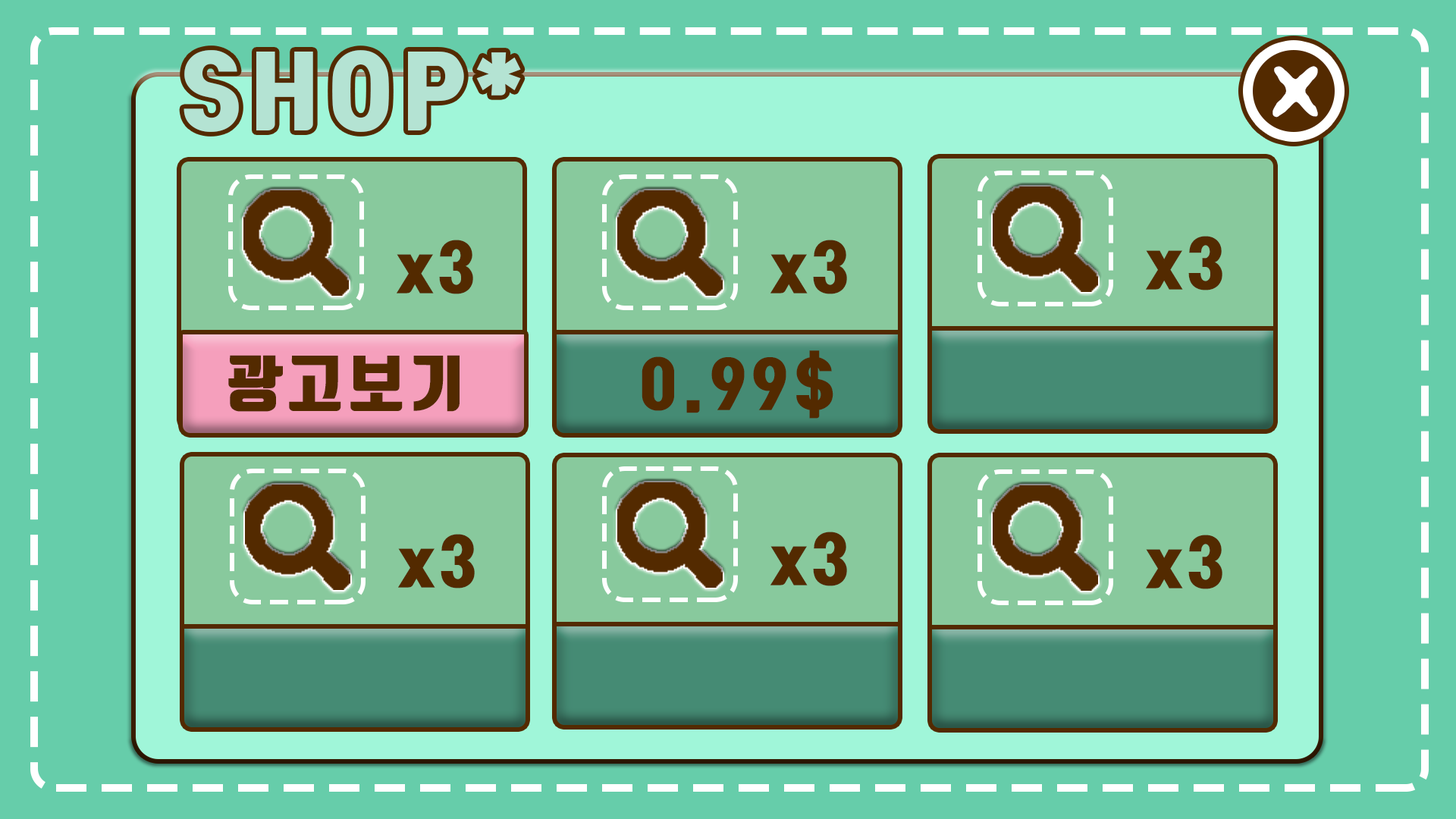
<style>
.page{position:relative;width:1456px;height:819px;background:#66cdaa}
.page>*{position:absolute;margin:0}
.t1{font:91px "TmonMonsoriBlack";letter-spacing:0.1em;color:#b4e3d3}
.t2{font:60.7px "TmonMonsoriBlack";letter-spacing:0.1em;color:#532a00}
</style>
<div class="page">
<p class="t1" style="left:184px;top:50px;width:337px;height:82px">SHOP*</p>
<p class="t2" style="left:397px;top:240px;width:76px;height:54px">x3</p>
<p class="t2" style="left:770px;top:240px;width:77px;height:54px">x3</p>
<p class="t2" style="left:1146px;top:236px;width:76px;height:54px">x3</p>
<p class="t2" style="left:642px;top:350px;width:191px;height:69px">0.99$</p>
<p class="t2" style="left:228px;top:355px;width:232px;height:57px">광고보기</p>
<p class="t2" style="left:398px;top:534px;width:77px;height:54px">x3</p>
<p class="t2" style="left:770px;top:532px;width:77px;height:54px">x3</p>
<p class="t2" style="left:1146px;top:535px;width:76px;height:54px">x3</p>
</div>
